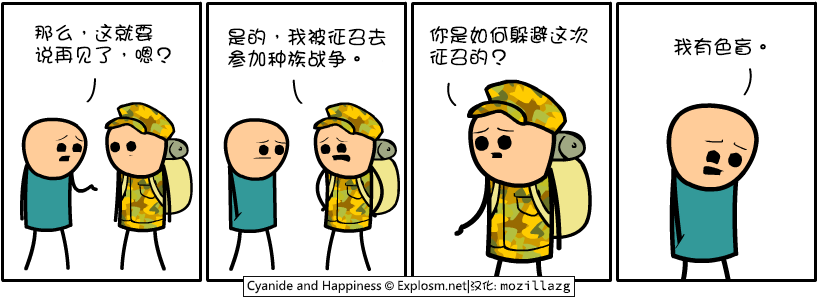
<style>
.page{position:relative;width:820px;height:300px;background:#ffffff}
.page>*{position:absolute;margin:0}
.t1{font:20px/22px "DFGirl";color:#000000}
.t2{font:20px "DFGirl";color:#000000}
</style>
<div class="page">
<p class="t1" style="left:35px;top:23px;width:136px;height:41px">那么，这就要<br>说再见了，嗯？</p>
<p class="t1" style="left:228px;top:27px;width:158px;height:41px">是的，我被征召去<br>参加种族战争。</p>
<p class="t1" style="left:429px;top:25px;width:159px;height:41px">你是如何躲避这次<br>征召的？</p>
<p class="t2" style="left:673px;top:37px;width:93px;height:19px">我有色盲。</p>
</div>
